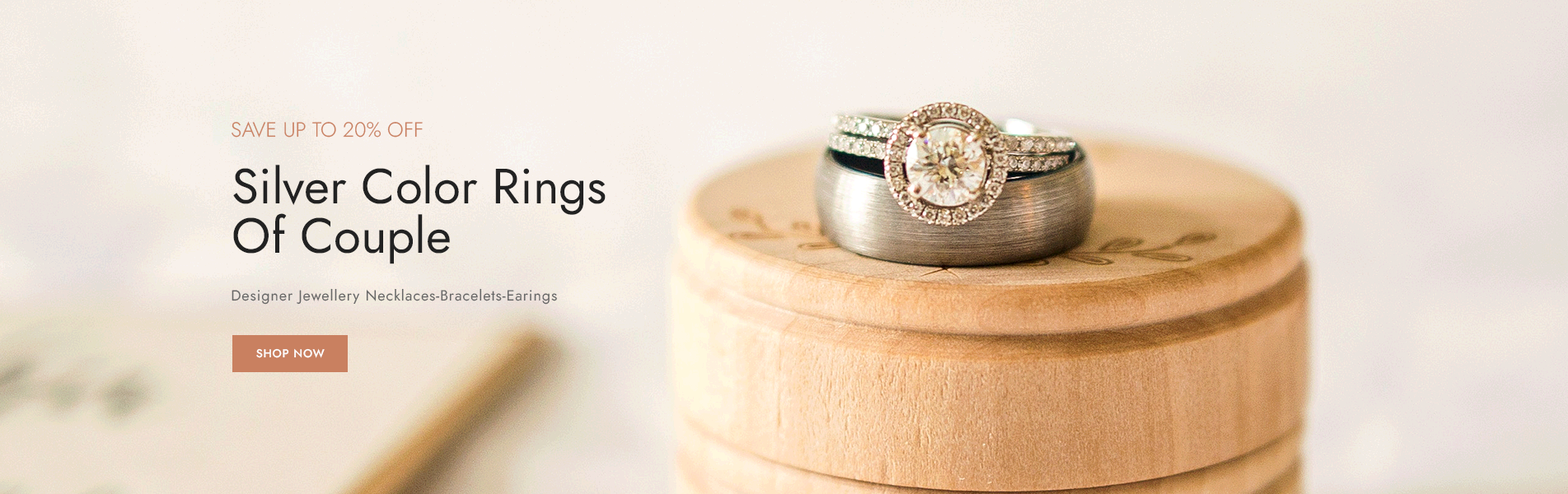
<style>
.page{position:relative;width:1568px;height:494px}
.page>*{position:absolute;margin:0}
.t1{font:20.6px "Jost-Light";color:#c98060;text-transform:uppercase}
.t2{font:49.4px/49.4px "Jost-Regular";color:#222222}
.t3{font:14.8px "Jost-Regular";letter-spacing:0.05em;color:#666666}
.t4{font:11.5px "Jost-Medium";letter-spacing:0.05em;color:#ffffff;text-transform:uppercase}
</style>
<div class="page">
<p class="t1" style="left:232px;top:121px;width:191px;height:17px">Save Up To 20% Off</p>
<p class="t2" style="left:233px;top:165px;width:373px;height:99px">Silver Color Rings <br>Of Couple</p>
<p class="t3" style="left:232px;top:288px;width:325px;height:17px">Designer Jewellery Necklaces-Bracelets-Earings</p>
<p class="t4" style="left:256px;top:349px;width:69px;height:9px">Shop Now</p>
</div>
